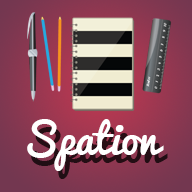
<style>
.page{position:relative;width:192px;height:192px}
.page>*{position:absolute;margin:0}
.t1{font:41.7px "Pacifico";color:#ffffff}
</style>
<div class="page">
<p class="t1" style="left:27px;top:119px;width:137px;height:52px">Spation</p>
</div>
